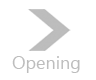
<style>
.page{position:relative;width:96px;height:80px;background:#ffffff}
.page>*{position:absolute;margin:0}
.t1{font:18px "SegoeUI";color:#bdbdbd}
</style>
<div class="page">
<p class="t1" style="left:12px;top:56px;width:68px;height:17px">Opening</p>
</div>
